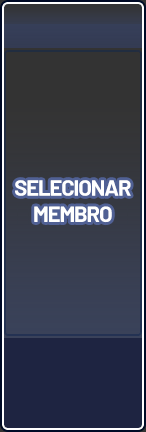
<style>
.page{position:relative;width:146px;height:432px}
.page>*{position:absolute;margin:0}
.t1{font:22px "Barlow-Bold";letter-spacing:-0.05em;color:#ffffff}
</style>
<div class="page">
<p class="t1" style="left:15px;top:180px;width:116px;height:43px;text-align:center">SELECIONAR<br>MEMBRO</p>
</div>
